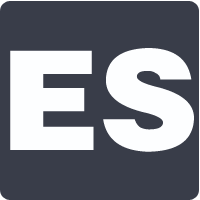
<style>
.page{position:relative;width:200px;height:200px;background:#393d49}
.page>*{position:absolute;margin:0}
.t1{font:138px "FZCCHJW--GB1-0";color:#fdfeff}
</style>
<div class="page">
<p class="t1" style="left:10px;top:48px;width:184px;height:104px">ES</p>
</div>
